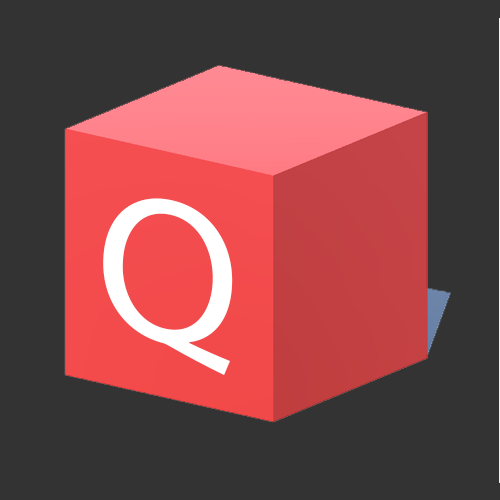
<style>
.page{position:relative;width:500px;height:500px;background:#333333}
.page>*{position:absolute;margin:0}
.t1{font:206.1px "MyriadPro-Regular";color:#ffffff;scale:1.04 1}
</style>
<div class="page">
<p class="t1" style="left:103px;top:198px;width:130px;height:177px;rotate:13deg">Q</p>
</div>
